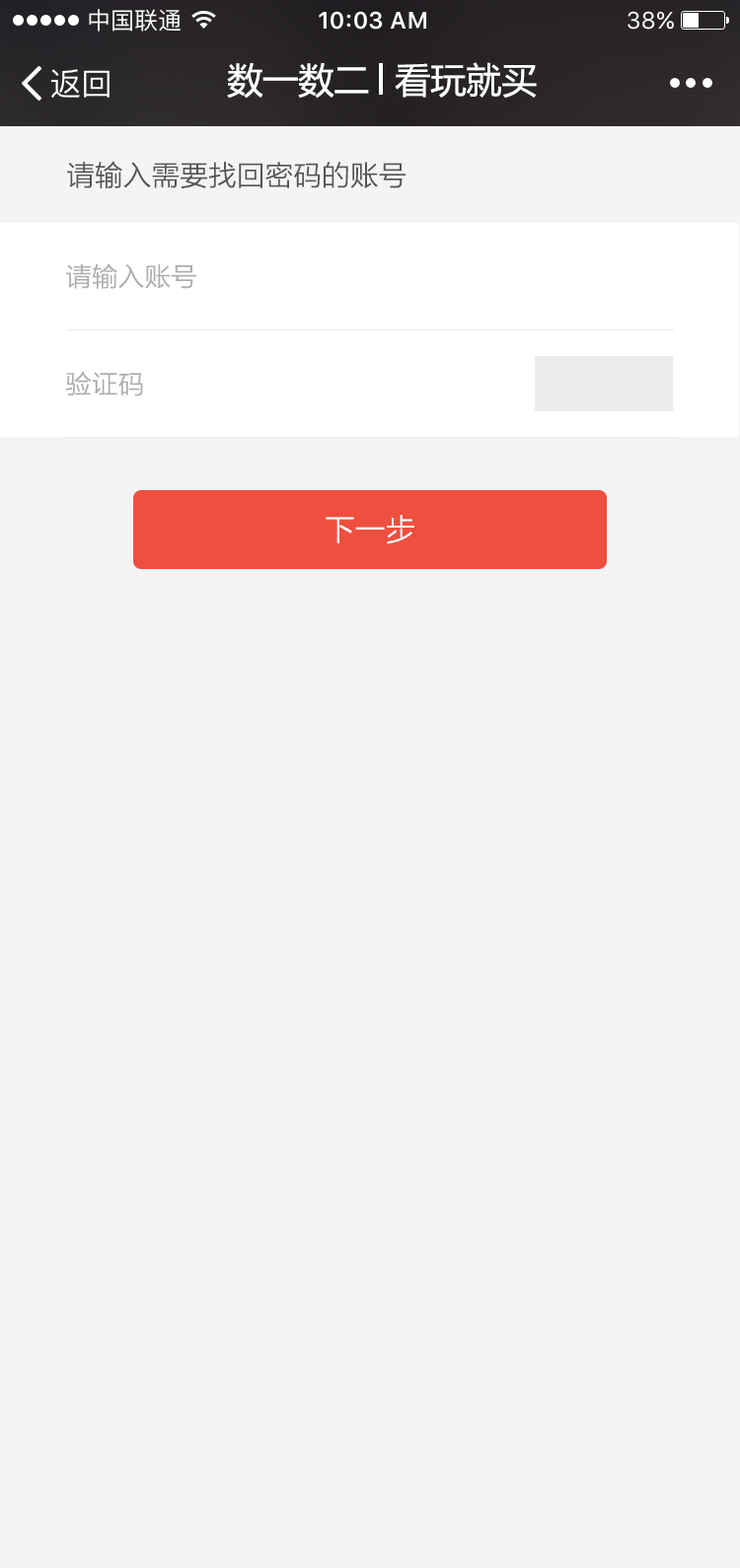
<style>
.page{position:relative;width:740px;height:1568px;background:#f4f4f4}
.page>*{position:absolute;margin:0}
.t1{font:35.5px "MicrosoftYaHei";color:#ffffff}
.t2{font:27.6px "MicrosoftYaHeiLight";color:#555555;font-weight:bold}
.t3{font:25.6px "MicrosoftYaHeiLight";color:#adadad;font-weight:bold}
.t4{font:29.6px "MicrosoftYaHeiLight";color:#ffffff;font-weight:bold}
</style>
<div class="page">
<p class="t1" style="left:227px;top:62px;width:142px;height:37px">数一数二</p>
<p class="t1" style="left:394px;top:62px;width:142px;height:36px">看玩就买</p>
<p class="t2" style="left:67px;top:161px;width:339px;height:27px">请输入需要找回密码的账号</p>
<p class="t3" style="left:66px;top:263px;width:130px;height:26px">请输入账号</p>
<p class="t3" style="left:66px;top:371px;width:77px;height:25px">验证码</p>
<p class="t4" style="left:325px;top:515px;width:89px;height:29px">下一步</p>
</div>
